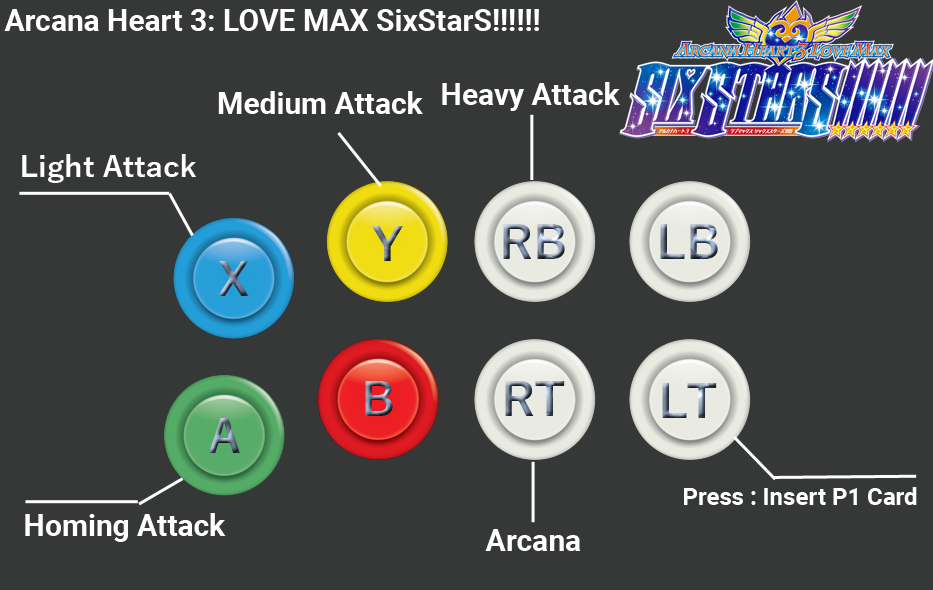
<style>
.page{position:relative;width:933px;height:590px;background:#363838}
.page>*{position:absolute;margin:0}
.t1{font:30px "Roboto-Bold";color:#ffffff}
.t2{font:30px "YuGothic-Bold";color:#ffffff}
.t3{font:24px "Roboto-Bold";color:#ffffff}
</style>
<div class="page">
<p class="t1" style="left:4px;top:9px;width:535px;height:22px">Arcana Heart 3: LOVE MAX SixStarS!!!!!!</p>
<p class="t1" style="left:442px;top:82px;width:178px;height:29px">Heavy Attack</p>
<p class="t1" style="left:218px;top:91px;width:205px;height:23px">Medium Attack</p>
<p class="t2" style="left:22px;top:154px;width:174px;height:29px">Light Attack</p>
<p class="t3" style="left:684px;top:487px;width:233px;height:18px">Press : Insert P1 Card</p>
<p class="t1" style="left:25px;top:513px;width:201px;height:29px">Homing Attack</p>
<p class="t1" style="left:485px;top:529px;width:96px;height:22px">Arcana</p>
</div>
